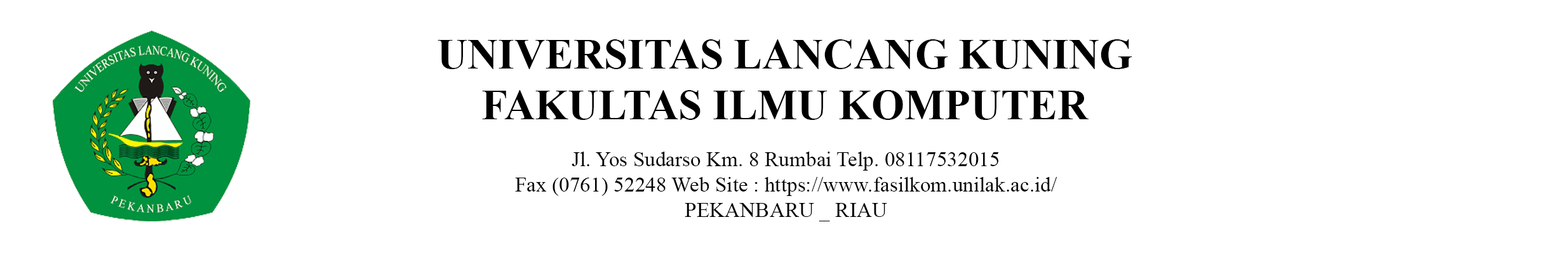
<style>
.page{position:relative;width:1568px;height:274px;background:#ffffff}
.page>*{position:absolute;margin:0}
.t1{font:42.3px "TimesNewRomanPS-BoldMT";color:#000000}
.t2{font:21.2px "TimesNewRomanPSMT";color:#000000}
</style>
<div class="page">
<p class="t1" style="left:438px;top:39px;width:694px;height:81px;text-align:center">UNIVERSITAS LANCANG KUNING<br>FAKULTAS ILMU KOMPUTER</p>
<p class="t2" style="left:515px;top:152px;width:542px;height:70px;text-align:center">Jl. Yos Sudarso Km. 8 Rumbai Telp. 08117532015<br>Fax (0761) 52248 Web Site : https://www.fasilkom.unilak.ac.id/<br>PEKANBARU _ RIAU</p>
</div>
